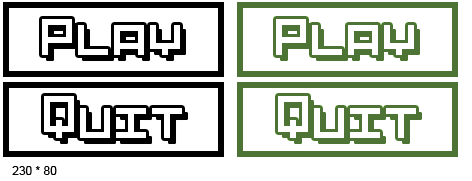
<style>
.page{position:relative;width:472px;height:181px;background:#ffffff}
.page>*{position:absolute;margin:0}
.t1{font:48px "Pixel-Art";color:#ffffff}
.t2{font:12px "ArialMT";color:#000000}
</style>
<div class="page">
<p class="t1" style="left:42px;top:19px;width:138px;height:36px">Play</p>
<p class="t1" style="left:276px;top:19px;width:138px;height:36px">Play</p>
<p class="t1" style="left:44px;top:96px;width:138px;height:42px">Quit</p>
<p class="t1" style="left:278px;top:96px;width:138px;height:42px">Quit</p>
<p class="t2" style="left:12px;top:166px;width:45px;height:9px">230 * 80</p>
</div>
